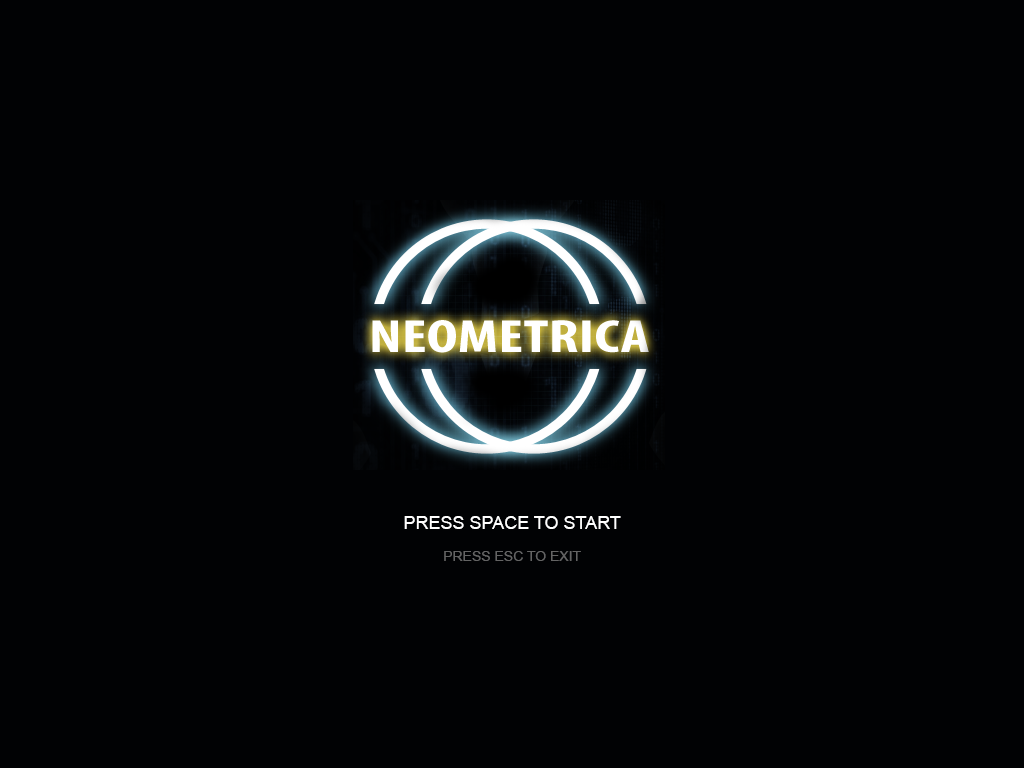
<style>
.page{position:relative;width:1024px;height:768px;background:#010204}
.page>*{position:absolute;margin:0}
.t1{font:18px "ArialMT";color:#ffffff}
.t2{font:14px "ArialMT";color:#646464}
</style>
<div class="page">
<p class="t1" style="left:404px;top:516px;width:217px;height:13px">PRESS SPACE TO START</p>
<p class="t2" style="left:444px;top:551px;width:137px;height:10px">PRESS ESC TO EXIT</p>
</div>
